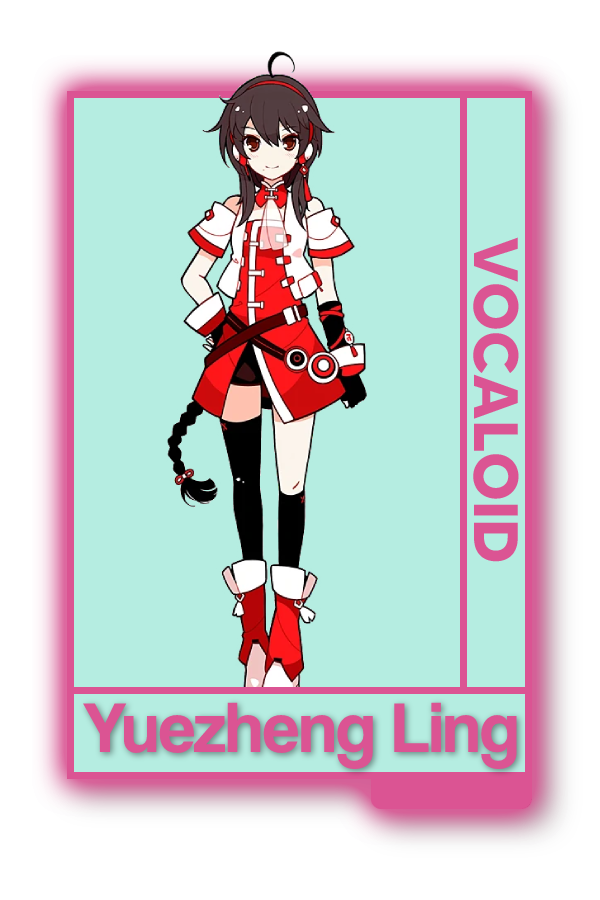
<style>
.page{position:relative;width:600px;height:900px;background:#b5ede1}
.page>*{position:absolute;margin:0}
.t1{font:62.5px "MADETOMMY-Bold";color:#db5493}
.t2{font:73.1px "CoolveticaRg-Regular";color:#db5493}
</style>
<div class="page">
<p class="t1" style="left:473px;top:237px;width:46px;height:325px;rotate:90deg">VOCALOID</p>
<p class="t2" style="left:83px;top:702px;width:434px;height:67px">Yuezheng Ling</p>
</div>
